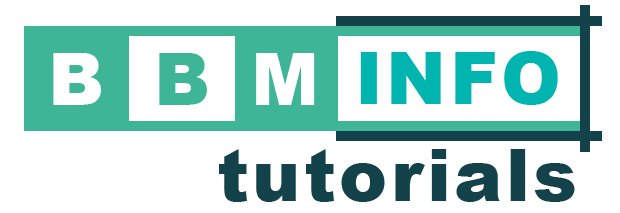
<style>
.page{position:relative;width:620px;height:213px;background:#ffffff}
.page>*{position:absolute;margin:0}
.t1{font:72px "Arial-Black";letter-spacing:0.05em;color:#ffffff}
.t2{font:72px "Arial-Black";letter-spacing:0.05em;color:#3fb598}
.t3{font:72px "Arial-Black";letter-spacing:0.05em;color:#00b5af}
.t4{font:72px "Arial-Black";letter-spacing:0.05em;color:#13424a}
</style>
<div class="page">
<p class="t1" style="left:53px;top:53px;width:48px;height:52px">B</p>
<p class="t2" style="left:159px;top:53px;width:48px;height:52px">B</p>
<p class="t1" style="left:256px;top:53px;width:59px;height:52px">M</p>
<p class="t3" style="left:360px;top:51px;width:198px;height:54px">INFO</p>
<p class="t4" style="left:219px;top:149px;width:356px;height:53px">tutorials</p>
</div>
